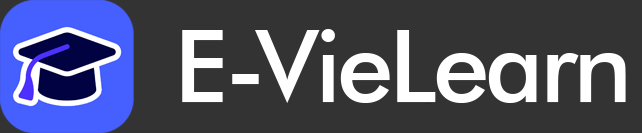
<style>
.page{position:relative;width:642px;height:133px;background:#333333}
.page>*{position:absolute;margin:0}
.t1{font:101px "FuturaBT-Medium";letter-spacing:-0.04em;color:#ffffff}
</style>
<div class="page">
<p class="t1" style="left:182px;top:29px;width:444px;height:74px">E-VieLearn</p>
</div>
